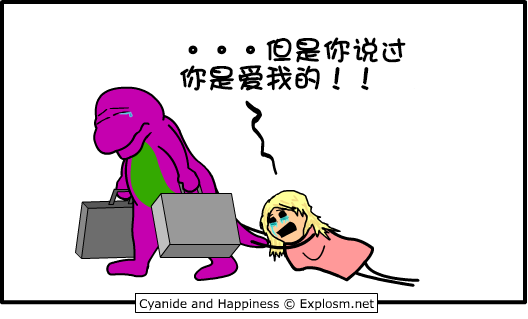
<style>
.page{position:relative;width:528px;height:319px;background:#ffffff}
.page>*{position:absolute;margin:0}
.t1{font:28px/28px "DFGirl";color:#000000;font-weight:bold}
</style>
<div class="page">
<p class="t1" style="left:180px;top:37px;width:226px;height:54px">。。。但是你说过<br>你是爱我的！！</p>
</div>
